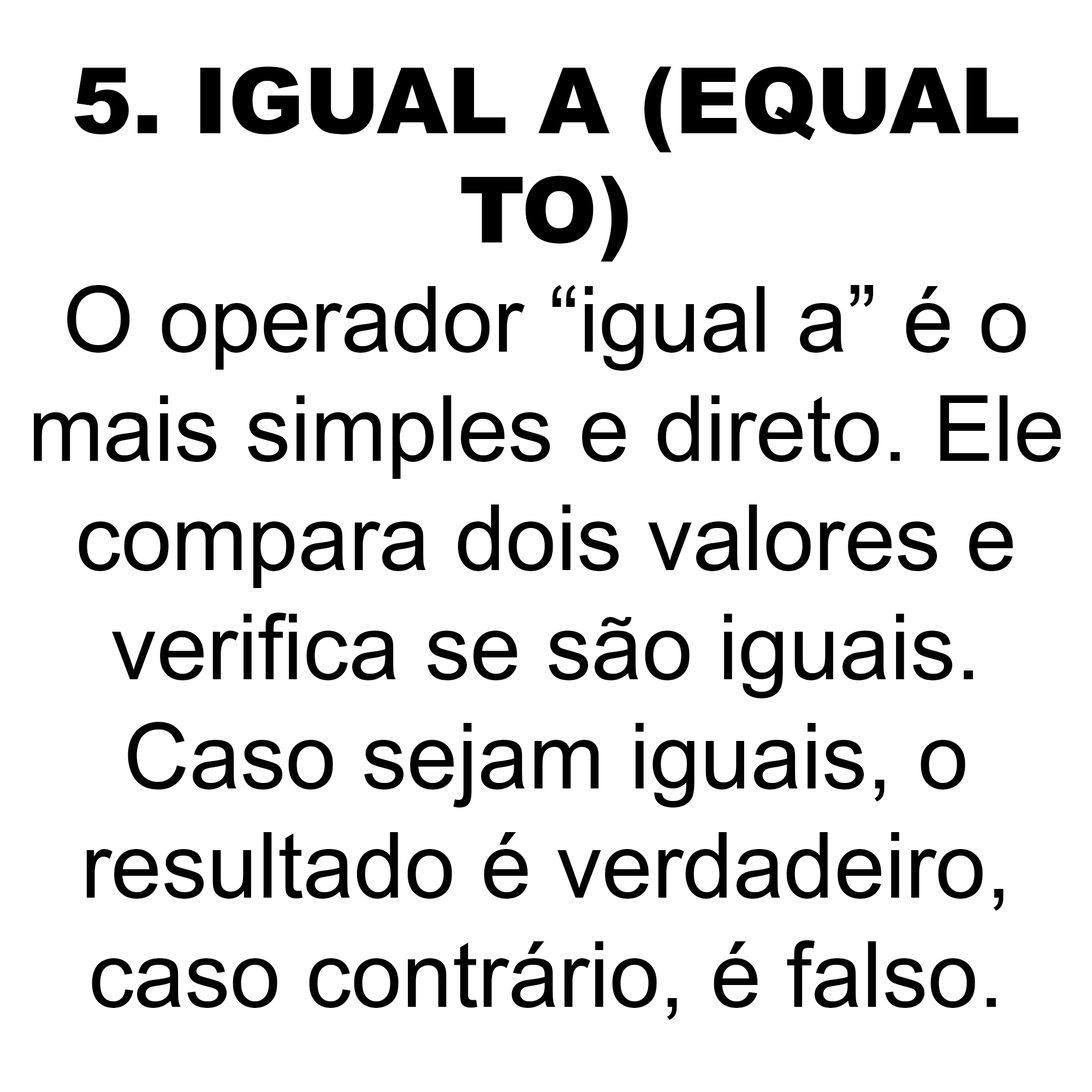
<style>
.page{position:relative;width:1092px;height:1092px;background:#ffffff}
.page>*{position:absolute;margin:0}
.t1{font:91px "ArialMT";color:#000000}
.t2{font:91px "Arial-Black";color:#000000}
</style>
<div class="page">
<p class="t1" style="left:34px;top:67px;width:1027px;height:953px;text-align:center"><span class="t2">5. IGUAL A (EQUAL<br>TO)<br></span>O operador “igual a” é o<br>mais simples e direto. Ele<br>compara dois valores e<br>verifica se são iguais.<br>Caso sejam iguais, o<br>resultado é verdadeiro,<br>caso contrário, é falso.</p>
</div>
